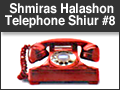
<style>
.page{position:relative;width:120px;height:90px;background:#ffffff}
.page>*{position:absolute;margin:0}
.t1{font:13.2px/12px "Helvetica-Bold";color:#ffffff;scale:0.91 1}
</style>
<div class="page">
<p class="t1" style="left:5px;top:3px;width:110px;height:25px;text-align:center">Shmiras Halashon <br>Telephone Shiur #8</p>
</div>
